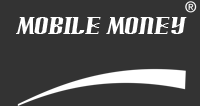
<style>
.page{position:relative;width:200px;height:106px;background:#333333}
.page>*{position:absolute;margin:0}
.t1{font:21px "Arnprior";color:#ffffff}
</style>
<div class="page">
<p class="t1" style="left:16px;top:17px;width:171px;height:17px">Mobile Money</p>
</div>
